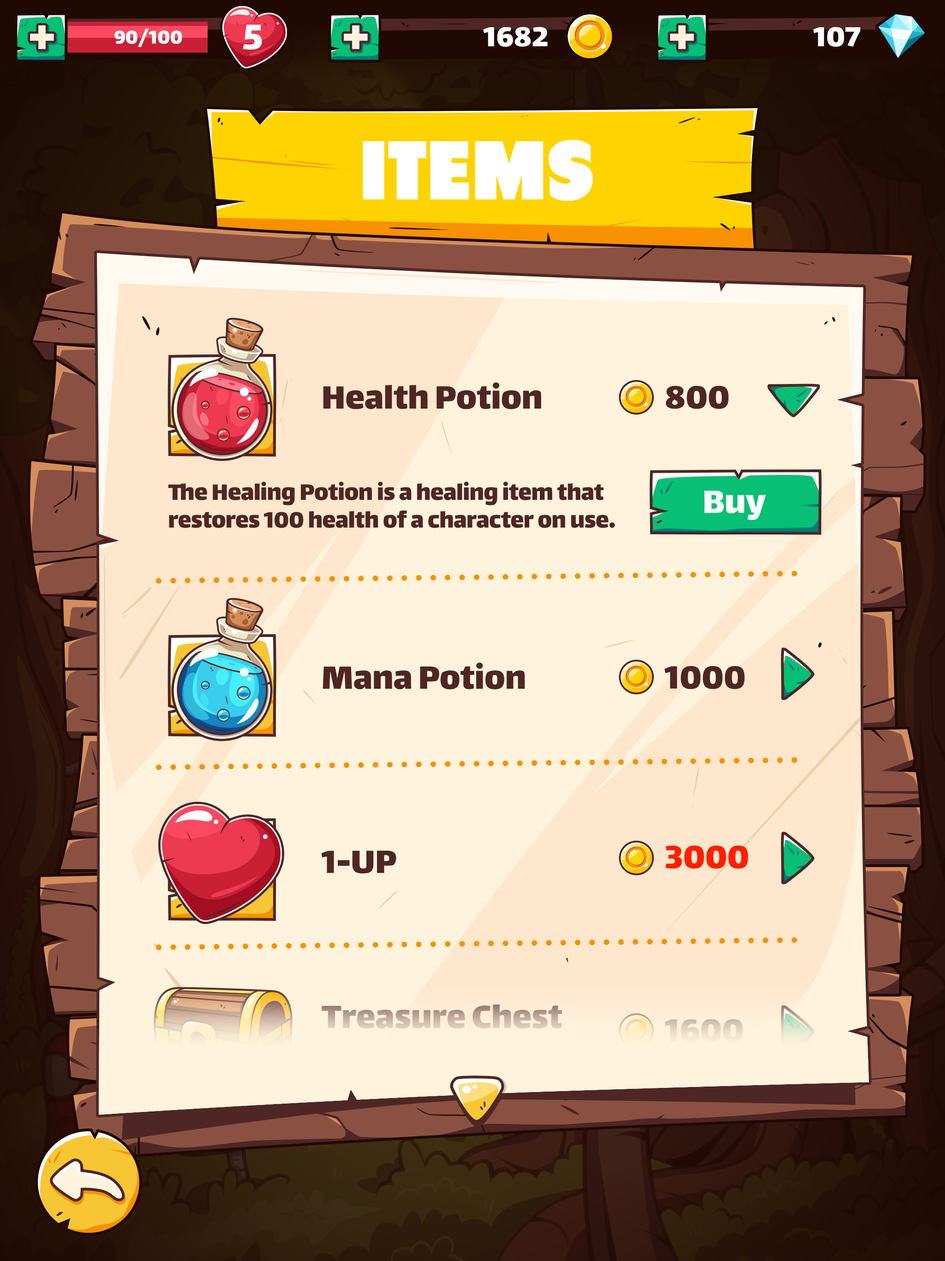
<style>
.page{position:relative;width:945px;height:1261px;background:#fff3dd}
.page>*{position:absolute;margin:0}
.t1{font:57.2px "Lalezar-Regular";color:#fff3dd}
.t2{font:22.2px "Lalezar-Regular";color:#ffffff}
.t3{font:42.5px "Lalezar-Regular";color:#ffffff}
.t4{font:33.2px "Lalezar-Regular";color:#ffffff}
.t5{font:83.1px "Tondu-Beta";color:#ffffff;text-transform:uppercase}
.t6{font:38.8px "Lalezar-Regular";color:#4e2623}
.t7{font:26.8px/27.7px "Lalezar-Regular";color:#4e2623}
.t8{font:38.8px "Lalezar-Regular";color:#ffffff}
.t9{font:38.8px "Lalezar-Regular";color:#ff1e00}
.t10{font:38.8px "Lalezar-Regular"}
.t11{font:38.8px "Lalezar-Regular";color:#e8d8c5}
</style>
<div class="page">
<p class="t1" style="left:30px;top:25px;width:24px;height:24px">+</p>
<p class="t2" style="left:114px;top:29px;width:68px;height:18px">90/100</p>
<p class="t3" style="left:243px;top:24px;width:19px;height:26px">5</p>
<p class="t1" style="left:344px;top:25px;width:24px;height:24px">+</p>
<p class="t4" style="left:483px;top:27px;width:65px;height:20px">1682</p>
<p class="t1" style="left:670px;top:25px;width:24px;height:24px">+</p>
<p class="t4" style="left:813px;top:27px;width:48px;height:20px">107</p>
<p class="t5" style="left:363px;top:140px;width:230px;height:61px">items</p>
<p class="t6" style="left:323px;top:382px;width:219px;height:27px">Health Potion</p>
<p class="t6" style="left:666px;top:386px;width:63px;height:23px">800</p>
<p class="t7" style="left:168px;top:481px;width:447px;height:47px">The Healing Potion is a healing item that restores 100 health of a character on use.</p>
<p class="t8" style="left:704px;top:491px;width:62px;height:29px">Buy</p>
<p class="t6" style="left:323px;top:662px;width:202px;height:28px">Mana Potion</p>
<p class="t6" style="left:665px;top:666px;width:80px;height:23px">1000</p>
<p class="t9" style="left:666px;top:846px;width:83px;height:23px">3000</p>
<p class="t6" style="left:321px;top:851px;width:76px;height:23px">1-UP</p>
<p class="t10" style="left:322px;top:1005px;width:240px;height:24px">Treasure Chest</p>
<p class="t11" style="left:665px;top:1019px;width:78px;height:23px">1600</p>
</div>
